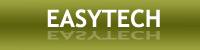
<style>
.page{position:relative;width:200px;height:50px}
.page>*{position:absolute;margin:0}
.t1{font:24px "TrebuchetMS-Bold";color:#ffffff}
.t2{font:11.4px "TrebuchetMS-Bold";color:#969a56;scale:2.1 1}
</style>
<div class="page">
<p class="t1" style="left:47px;top:9px;width:113px;height:19px">EASYTECH</p>
<p class="t2" style="left:47px;top:31px;width:113px;height:9px">EASYTECH</p>
</div>
